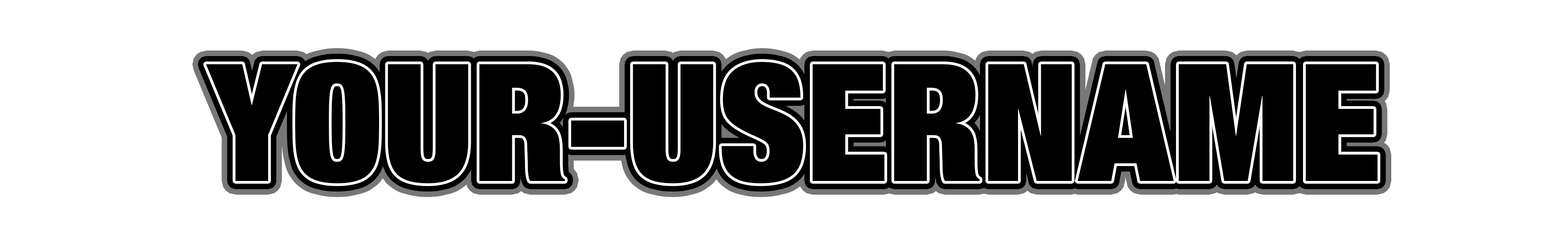
<style>
.page{position:relative;width:1568px;height:235px;background:#ffffff}
.page>*{position:absolute;margin:0}
.t1{font:163.4px "HelveticaNeueLTStd-XBlkCn";color:#000000}
</style>
<div class="page">
<p class="t1" style="left:206px;top:62px;width:1172px;height:121px">YOUR-USERNAME</p>
</div>
